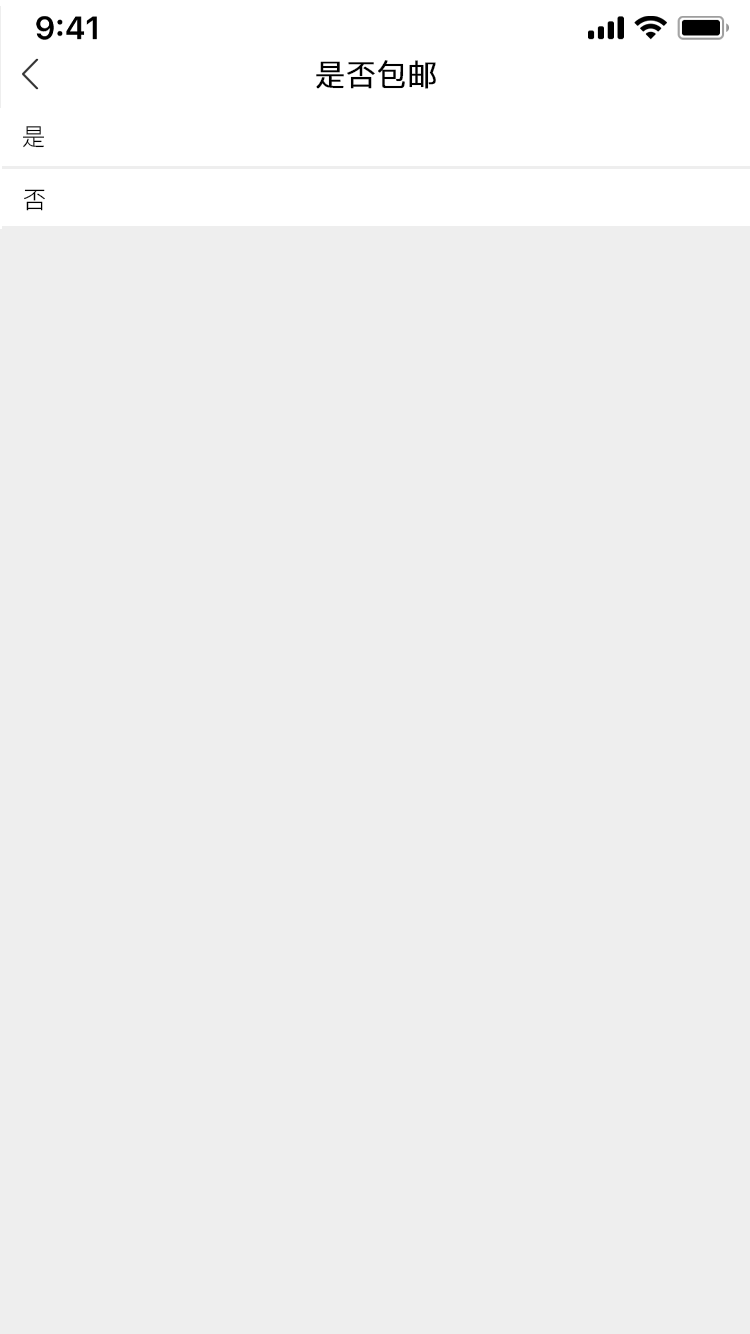
<style>
.page{position:relative;width:750px;height:1334px;background:#eeeeee}
.page>*{position:absolute;margin:0}
.t1{font:30px "PingFang-SC-Regular";color:#000000;font-weight:bold}
.t2{font:24px "PingFang-SC-Regular";color:#000000}
</style>
<div class="page">
<p class="t1" style="left:316px;top:60px;width:120px;height:29px">是否包邮</p>
<p class="t2" style="left:23px;top:126px;width:21px;height:22px">是</p>
<p class="t2" style="left:24px;top:189px;width:21px;height:22px">否</p>
</div>
